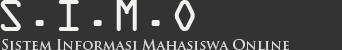
<style>
.page{position:relative;width:342px;height:50px;background:#333333}
.page>*{position:absolute;margin:0}
.t1{font:48px "OCRAExtended";color:#f1f1f0}
.t2{font:14px "TrajanPro-Bold";color:#dadada}
</style>
<div class="page">
<p class="t1" style="left:0px;top:0px;width:195px;height:31px">S.I.M.O</p>
<p class="t2" style="left:2px;top:39px;width:287px;height:11px">Sistem Informasi Mahasiswa Online</p>
</div>
